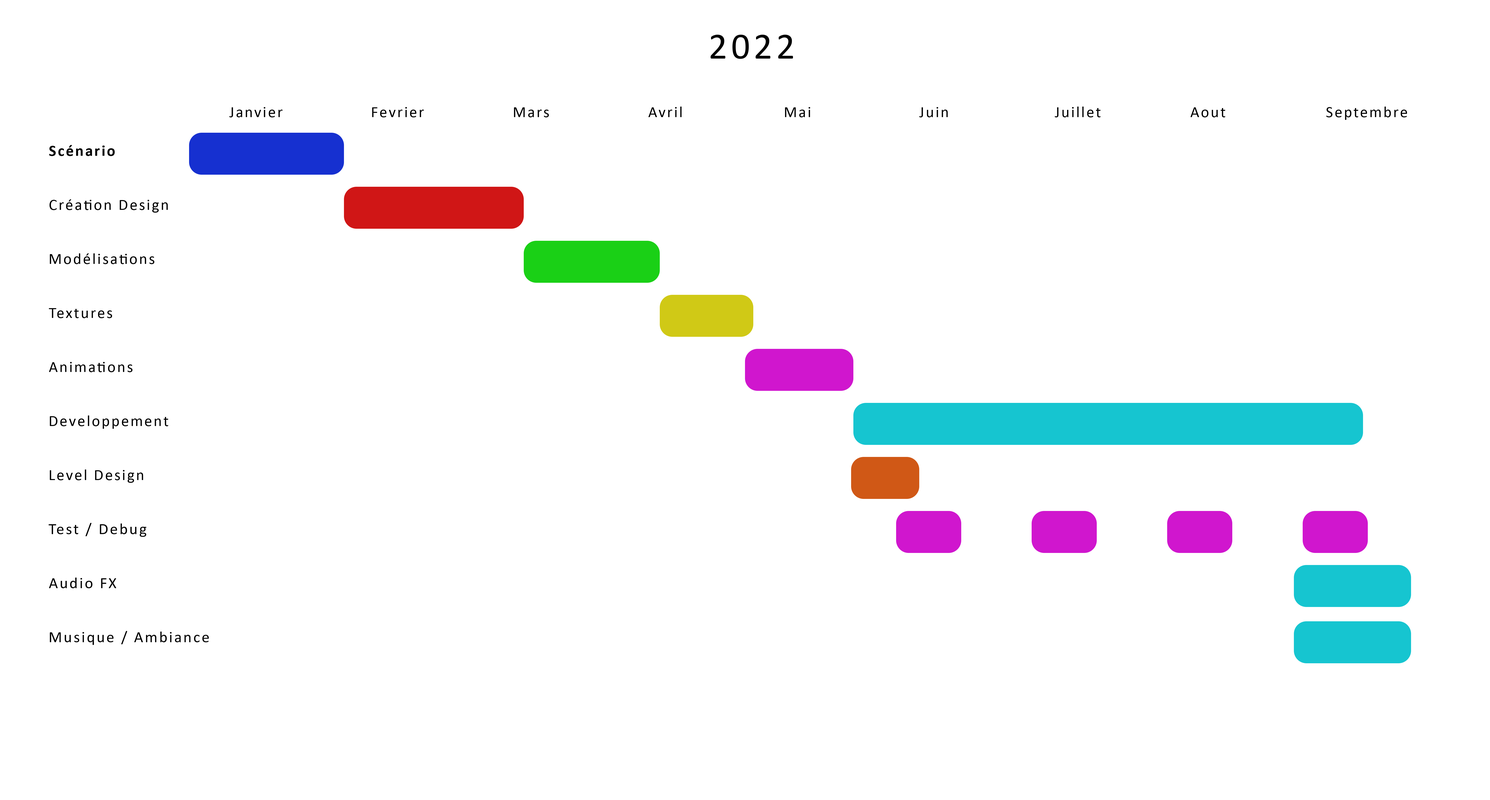
<style>
.page{position:relative;width:1490px;height:800px;background:#ffffff}
.page>*{position:absolute;margin:0}
.t1{font:37.2px "Calibri";letter-spacing:0.1em;color:#000000}
.t2{font:15.6px "Calibri";letter-spacing:0.1em;color:#000000}
.t3{font:15.6px "Calibri-Bold";letter-spacing:0.1em;color:#000000}
</style>
<div class="page">
<p class="t1" style="left:711px;top:35px;width:82px;height:24px">2022</p>
<p class="t2" style="left:229px;top:107px;width:54px;height:10px">Janvier</p>
<p class="t2" style="left:372px;top:107px;width:52px;height:10px">Fevrier</p>
<p class="t2" style="left:514px;top:107px;width:35px;height:10px">Mars</p>
<p class="t2" style="left:648px;top:107px;width:34px;height:10px">Avril</p>
<p class="t2" style="left:785px;top:107px;width:25px;height:10px">Mai</p>
<p class="t2" style="left:919px;top:107px;width:29px;height:10px">Juin</p>
<p class="t2" style="left:1055px;top:107px;width:46px;height:10px">Juillet</p>
<p class="t2" style="left:1191px;top:107px;width:34px;height:10px">Aout</p>
<p class="t2" style="left:1326px;top:107px;width:81px;height:13px">Septembre</p>
<p class="t3" style="left:49px;top:145px;width:66px;height:11px">Scénario</p>
<p class="t2" style="left:50px;top:199px;width:118px;height:14px">Création Design</p>
<p class="t2" style="left:50px;top:253px;width:104px;height:11px">Modélisations</p>
<p class="t2" style="left:49px;top:308px;width:63px;height:10px">Textures</p>
<p class="t2" style="left:49px;top:362px;width:84px;height:10px">Animations</p>
<p class="t2" style="left:50px;top:416px;width:118px;height:13px">Developpement</p>
<p class="t2" style="left:50px;top:470px;width:93px;height:13px">Level Design</p>
<p class="t2" style="left:49px;top:523px;width:97px;height:14px">Test / Debug</p>
<p class="t2" style="left:49px;top:578px;width:67px;height:11px">Audio FX</p>
<p class="t2" style="left:50px;top:631px;width:159px;height:14px">Musique / Ambiance</p>
</div>
